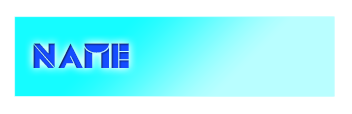
<style>
.page{position:relative;width:352px;height:114px;background:#ffffff}
.page>*{position:absolute;margin:0}
.t1{font:36px "CSBlocks";color:#154cff}
</style>
<div class="page">
<p class="t1" style="left:33px;top:43px;width:96px;height:25px">Name</p>
</div>
